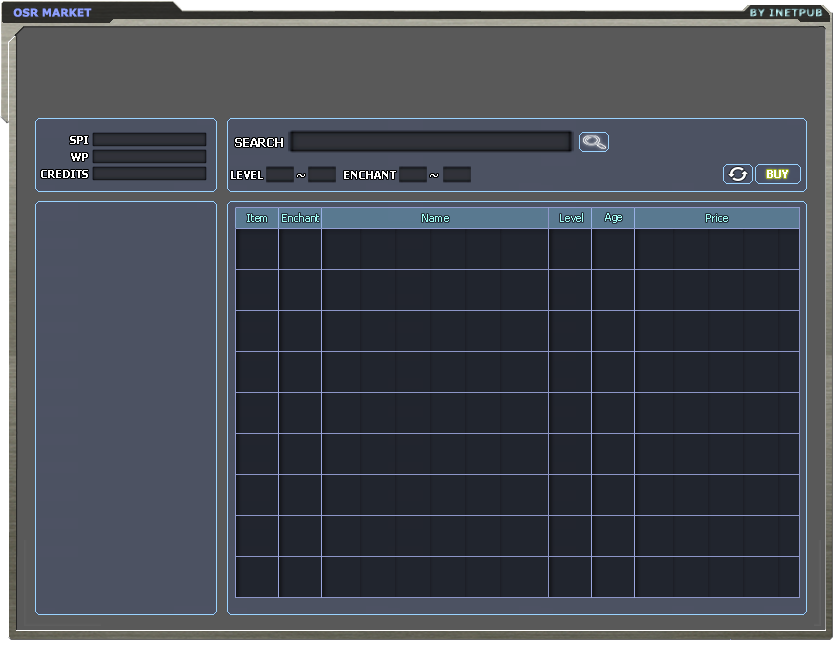
<style>
.page{position:relative;width:833px;height:649px;background:#21252e}
.page>*{position:absolute;margin:0}
.t1{font:10.7px "Verdana-Bold";color:#8ea0ff}
.t2{font:10.7px "Verdana-Bold"}
.t3{font:10.7px "Tahoma-Bold";color:#ffffff}
.t4{font:12px "Tahoma-Bold";color:#ffffff}
.t5{font:10.7px "Tahoma";color:#a4fff7}
</style>
<div class="page">
<p class="t1" style="left:13px;top:8px;width:79px;height:9px">OSR MARKET</p>
<p class="t2" style="left:750px;top:8px;width:73px;height:9px">BY INETPUB</p>
<p class="t3" style="left:70px;top:136px;width:18px;height:8px">SPI</p>
<p class="t4" style="left:235px;top:138px;width:48px;height:9px">SEARCH</p>
<p class="t3" style="left:71px;top:153px;width:17px;height:8px">WP</p>
<p class="t3" style="left:41px;top:170px;width:47px;height:8px">CREDITS</p>
<p class="t3" style="left:231px;top:171px;width:32px;height:8px">LEVEL</p>
<p class="t3" style="left:297px;top:174px;width:8px;height:3px">~</p>
<p class="t3" style="left:344px;top:171px;width:52px;height:8px">ENCHANT</p>
<p class="t3" style="left:430px;top:174px;width:8px;height:3px">~</p>
<p class="t3" style="left:767px;top:170px;width:21px;height:8px">BUY</p>
<p class="t5" style="left:247px;top:214px;width:20px;height:8px">Item</p>
<p class="t5" style="left:282px;top:213px;width:37px;height:9px">Enchant</p>
<p class="t5" style="left:422px;top:214px;width:27px;height:8px">Name</p>
<p class="t5" style="left:560px;top:213px;width:23px;height:9px">Level</p>
<p class="t5" style="left:605px;top:213px;width:17px;height:10px">Age</p>
<p class="t5" style="left:706px;top:214px;width:22px;height:8px">Price</p>
</div>
